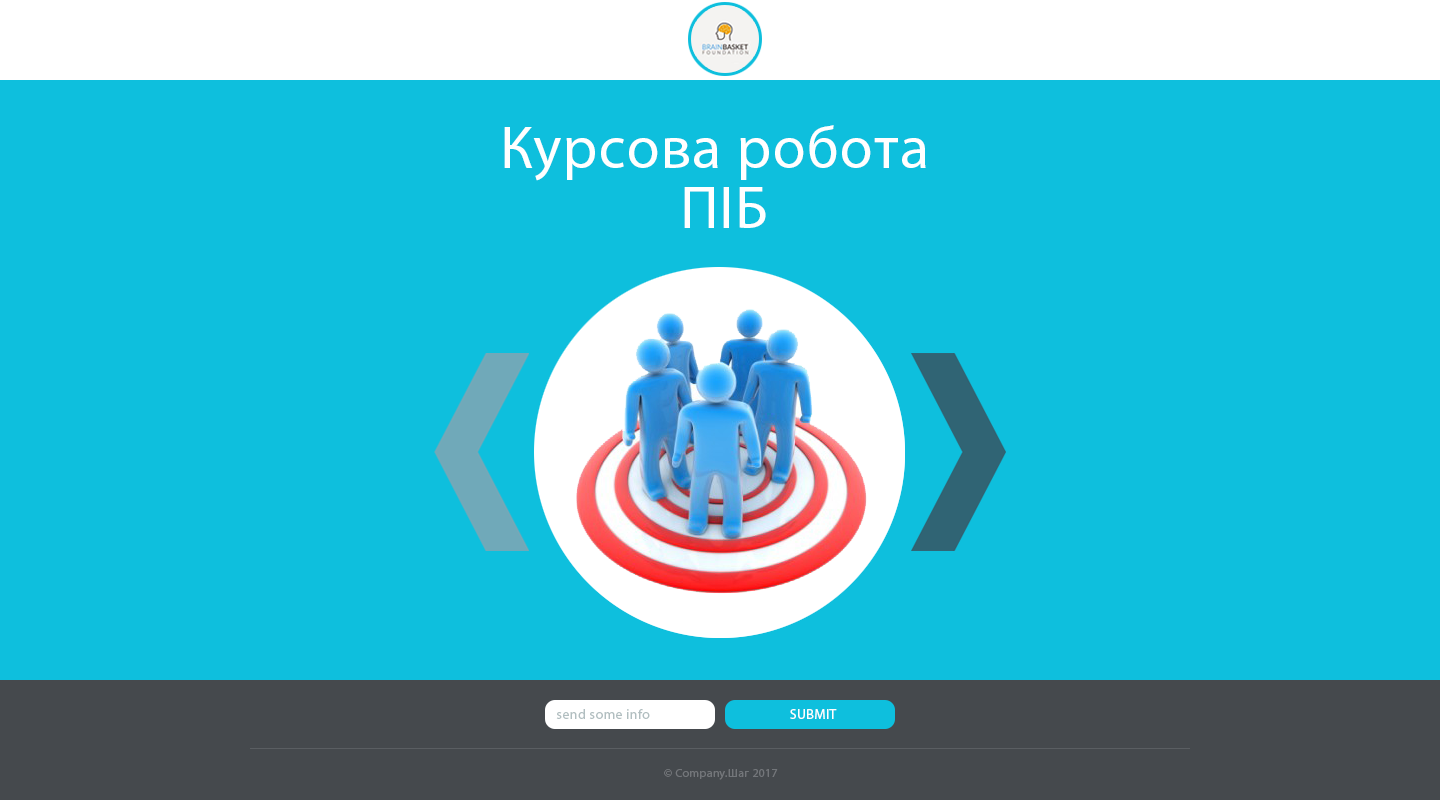
<style>
.page{position:relative;width:1440px;height:800px;background:#0ebfdd}
.page>*{position:absolute;margin:0}
.t1{font:60px/60px "MyriadPro-Regular";letter-spacing:0.025em;color:#ffffff}
.t2{font:14px "MyriadPro-Regular";letter-spacing:0.025em;color:#b1bec0}
.t3{font:14px "MyriadPro-Regular";letter-spacing:0.025em;color:#ffffff;text-transform:uppercase}
.t4{font:12px "MyriadPro-Regular";letter-spacing:0.025em;color:#73767a}
.t5{font:12px "MyriadPro-Regular";letter-spacing:0.025em;color:#73767a;text-transform:uppercase}
</style>
<div class="page">
<p class="t1" style="left:504px;top:125px;width:422px;height:103px;text-align:center">Курсова робота <br>ПІБ</p>
<p class="t2" style="left:556px;top:709px;width:94px;height:10px">send some info</p>
<p class="t3" style="left:790px;top:709px;width:47px;height:10px">Submit</p>
<p class="t4" style="left:664px;top:769px;width:114px;height:11px">© Company.Шаг <span class="t5">2017</span></p>
</div>
